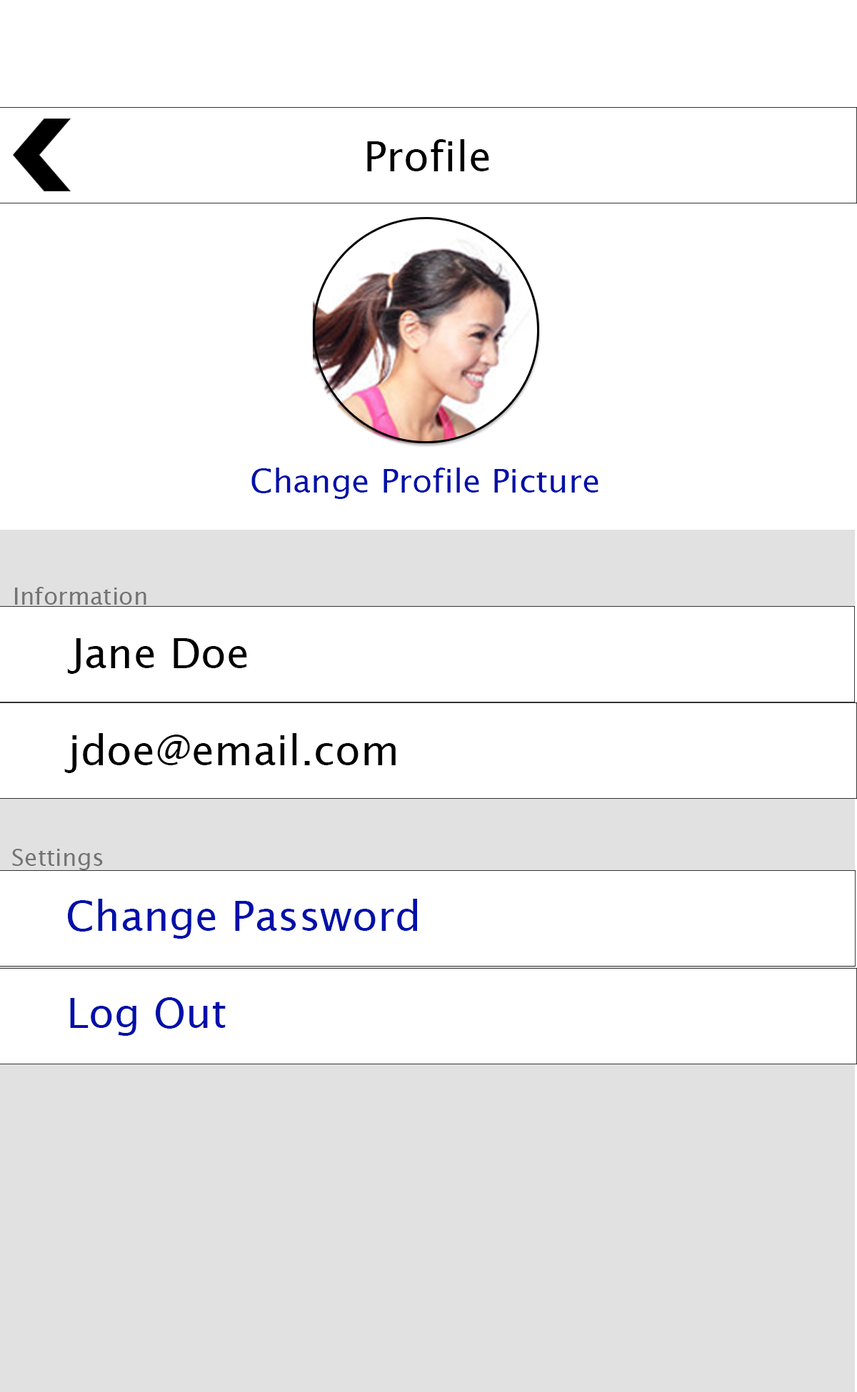
<style>
.page{position:relative;width:857px;height:1392px;background:#ffffff}
.page>*{position:absolute;margin:0}
.t1{font:41.6px "LucidaSans";color:#000000}
.t2{font:32.7px "LucidaSans";color:#0010a8}
.t3{font:23.8px "LucidaSans";color:#737373}
.t4{font:41.6px "LucidaSans";color:#0010a8}
</style>
<div class="page">
<p class="t1" style="left:367px;top:139px;width:122px;height:32px">Profile</p>
<p class="t2" style="left:251px;top:468px;width:347px;height:31px">Change Profile Picture</p>
<p class="t3" style="left:15px;top:587px;width:131px;height:18px">Information</p>
<p class="t1" style="left:67px;top:638px;width:180px;height:36px">Jane Doe</p>
<p class="t1" style="left:64px;top:733px;width:331px;height:40px">jdoe@email.com</p>
<p class="t3" style="left:12px;top:849px;width:91px;height:21px">Settings</p>
<p class="t4" style="left:68px;top:899px;width:349px;height:40px">Change Password</p>
<p class="t4" style="left:70px;top:997px;width:156px;height:39px">Log Out</p>
</div>
